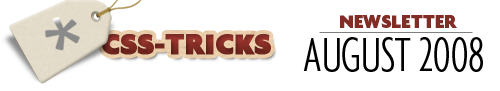
<style>
.page{position:relative;width:500px;height:91px;background:#ffffff}
.page>*{position:absolute;margin:0}
.t1{font:19.5px "Agenda-Black";color:#812d26;text-transform:uppercase}
.t2{font:30.7px "Agenda-Black";color:#7d2b24;font-weight:bold}
.t3{font:51.1px "Agenda-LightExtraCondensed";color:#000000;text-transform:uppercase}
</style>
<div class="page">
<p class="t1" style="left:340px;top:15px;width:117px;height:13px">newsletter</p>
<p class="t2" style="left:102px;top:34px;width:169px;height:21px">CSS-TRICKS</p>
<p class="t3" style="left:303px;top:37px;width:180px;height:35px">AUGUST 2008</p>
</div>
